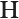
<style>
.page{position:relative;width:19px;height:19px;background:#ffffff}
.page>*{position:absolute;margin:0}
.t1{font:26px "Times-Roman";color:#1e1e1e}
</style>
<div class="page">
<p class="t1" style="left:0px;top:1px;width:19px;height:17px">H</p>
</div>
